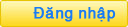
<style>
.page{position:relative;width:128px;height:27px}
.page>*{position:absolute;margin:0}
.t1{font:15px "VNI-Helve";color:#197bf5;font-weight:bold}
</style>
<div class="page">
<p class="t1" style="left:33px;top:7px;width:83px;height:15px">Ñaêng nhaäp</p>
</div>
